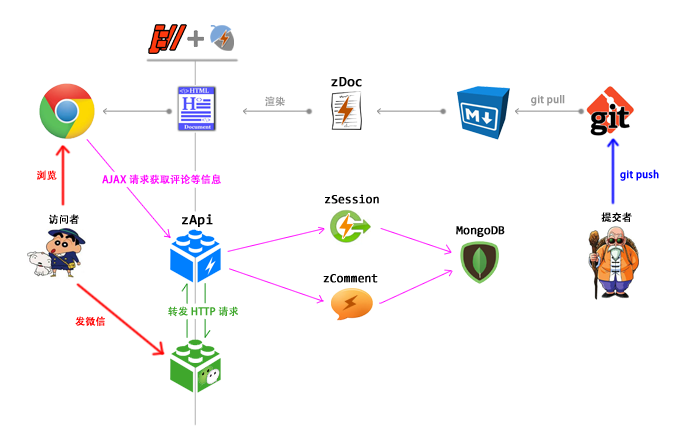
<style>
.page{position:relative;width:685px;height:447px;background:#ffffff}
.page>*{position:absolute;margin:0}
.t1{font:14px "Consolas";color:#000000;font-weight:bold}
.t2{font:10px "AdobeHeitiStd-Regular";color:#959595;font-weight:bold}
.t3{font:10px "AdobeHeitiStd-Regular";color:#ff0000;font-weight:bold}
.t4{font:10px "AdobeHeitiStd-Regular";color:#ff00ff;font-weight:bold}
.t5{font:10px "AdobeHeitiStd-Regular";color:#0000ff;font-weight:bold}
.t6{font:12px "Consolas";color:#000000;font-weight:bold}
.t7{font:10px "AdobeHeitiStd-Regular";color:#000000;font-weight:bold}
.t8{font:10px "AdobeHeitiStd-Regular";color:#3fa72c;font-weight:bold}
</style>
<div class="page">
<p class="t1" style="left:331px;top:77px;width:31px;height:10px">zDoc</p>
<p class="t2" style="left:265px;top:96px;width:20px;height:11px">渲染</p>
<p class="t2" style="left:531px;top:95px;width:34px;height:11px">git pull</p>
<p class="t3" style="left:37px;top:170px;width:20px;height:10px">浏览</p>
<p class="t4" style="left:102px;top:174px;width:119px;height:10px">AJAX 请求获取评论等信息</p>
<p class="t5" style="left:620px;top:169px;width:39px;height:12px">git push</p>
<p class="t6" style="left:325px;top:194px;width:54px;height:10px">zSession</p>
<p class="t7" style="left:49px;top:214px;width:30px;height:10px">访问者</p>
<p class="t1" style="left:182px;top:214px;width:31px;height:13px">zApi</p>
<p class="t7" style="left:601px;top:212px;width:31px;height:10px">提交者</p>
<p class="t6" style="left:456px;top:226px;width:49px;height:11px">MongoDB</p>
<p class="t6" style="left:323px;top:274px;width:55px;height:9px">zComment</p>
<p class="t3" style="left:75px;top:316px;width:30px;height:10px">发微信</p>
<p class="t8" style="left:168px;top:306px;width:70px;height:11px">转发 HTTP 请求</p>
</div>
